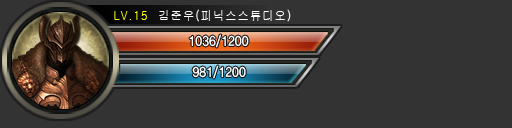
<style>
.page{position:relative;width:512px;height:128px;background:#333333}
.page>*{position:absolute;margin:0}
.t1{font:12.5px "Gulim";letter-spacing:0.1em;color:#ffffff;scale:0.9 1}
.t2{font:12.5px "Gulim";letter-spacing:0.1em;color:#fcff00;scale:0.9 1}
.t3{font:13.5px "YDIYGO340";color:#ffffff;scale:0.9 1}
</style>
<div class="page">
<p class="t1" style="left:114px;top:9px;width:177px;height:13px"><span class="t2">LV.15  </span>김준우(피닉스스튜디오)</p>
<p class="t3" style="left:189px;top:34px;width:60px;height:14px">1036/1200</p>
<p class="t3" style="left:192px;top:65px;width:54px;height:14px">981/1200</p>
</div>
